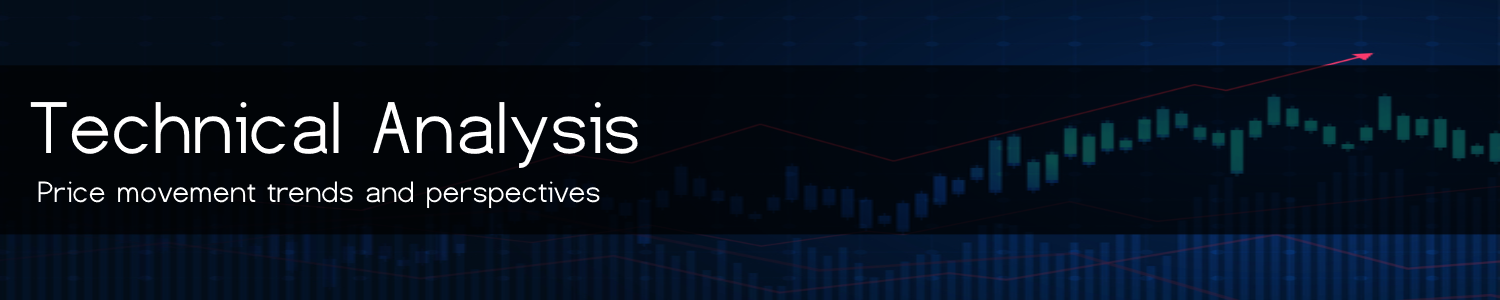
<style>
.page{position:relative;width:1500px;height:300px}
.page>*{position:absolute;margin:0}
.t1{font:77px "Dustismo";color:#ffffff}
.t2{font:31px "Dustismo";color:#ffffff}
</style>
<div class="page">
<p class="t1" style="left:30px;top:101px;width:608px;height:68px">Technical Analysis</p>
<p class="t2" style="left:38px;top:181px;width:562px;height:28px">Price movement trends and perspectives</p>
</div>
